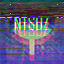
<style>
.page{position:relative;width:64px;height:64px}
.page>*{position:absolute;margin:0}
.t1{font:18px "AgencyFB-Reg"}
</style>
<div class="page">
<p class="t1" style="left:14px;top:20px;width:35px;height:14px">NTSDZ</p>
</div>
